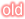
<style>
.page{position:relative;width:25px;height:19px}
.page>*{position:absolute;margin:0}
.t1{font:16px "ArialMT";color:#ffffff}
</style>
<div class="page">
<p class="t1" style="left:3px;top:3px;width:19px;height:13px">old</p>
</div>
